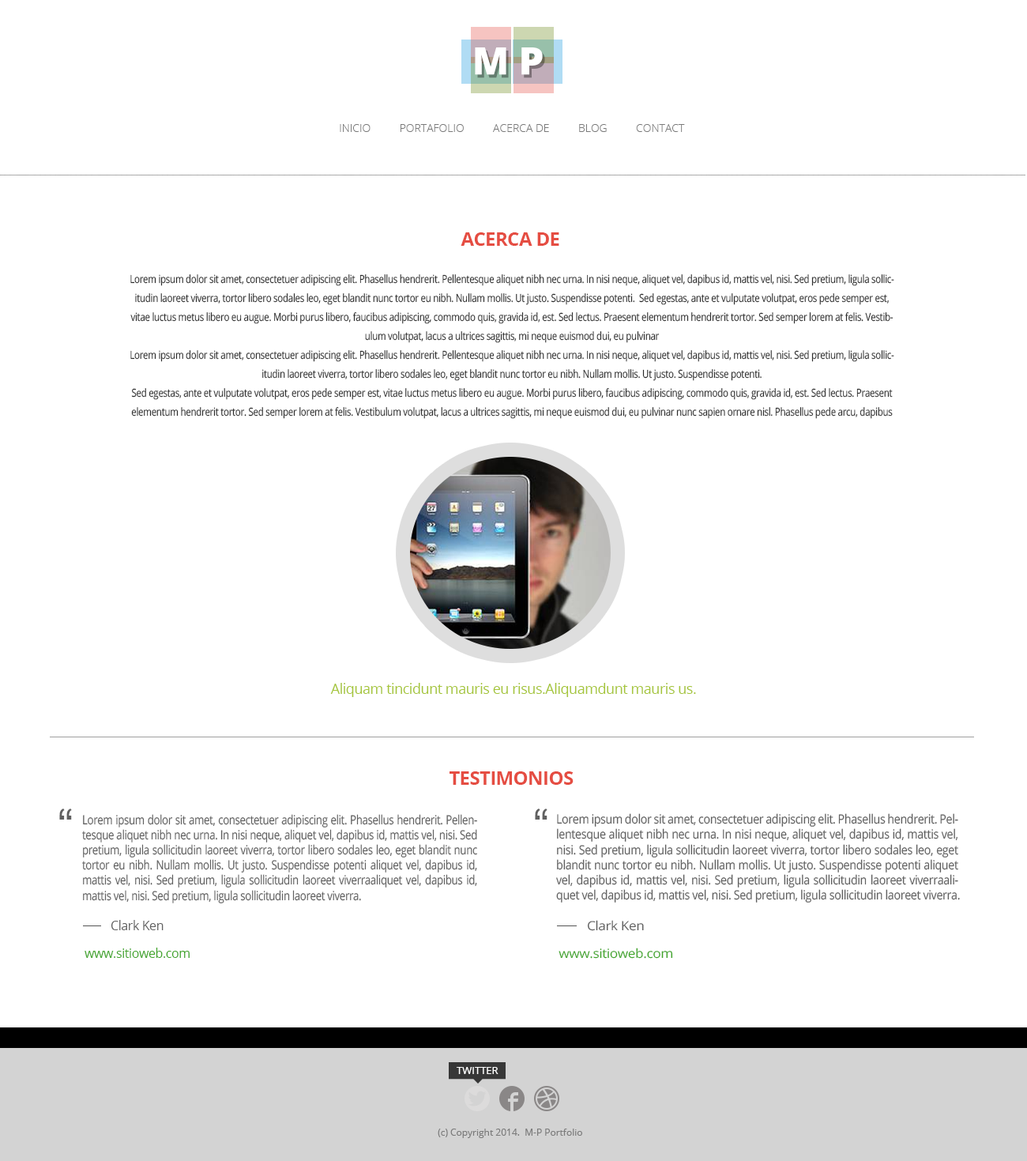
<style>
.page{position:relative;width:1027px;height:1161px;background:#ffffff}
.page>*{position:absolute;margin:0}
.t1{font:37.9px "OpenSans-Extrabold";letter-spacing:0.25em;color:#ffffff}
.t2{font:37.9px "OpenSans-Extrabold";letter-spacing:0.25em;color:#ffffff;scale:1.06 1}
.t3{font:11.1px "OpenSans-Light";color:#7a7a7a;text-transform:uppercase}
.t4{font:19px "OpenSans-Bold";letter-spacing:-0.025em;color:#e54d42;text-transform:uppercase}
.t5{font:11.1px/19px "OpenSans";letter-spacing:-0.025em;color:#2b2b2b;scale:0.83 1}
.t6{font:14.2px "OpenSans";letter-spacing:-0.025em;color:#a6c63a}
.t7{font:47.4px "ArialMT";letter-spacing:-0.025em;color:#616161}
.t8{font:12.6px "OpenSans";letter-spacing:-0.025em;color:#616161;scale:0.83 1}
.t9{font:12.7px "OpenSans";letter-spacing:-0.025em;color:#616161;scale:0.89 1}
.t10{font:12.6px "OpenSans";letter-spacing:-0.025em;color:#616161}
.t11{font:12.7px "OpenSans";letter-spacing:-0.025em;color:#616161;scale:1.08 1}
.t12{font:12.6px "OpenSans";letter-spacing:-0.025em;color:#41a62a}
.t13{font:12.7px "OpenSans";letter-spacing:-0.025em;color:#41a62a;scale:1.08 1}
.t14{font:10.3px "OpenSans";color:#ffffff;text-transform:uppercase}
.t15{font:9.5px "OpenSans";color:#7a7a7a}
</style>
<div class="page">
<p class="t1" style="left:475px;top:47px;width:68px;height:28px">M<span class="t2">P</span></p>
<p class="t3" style="left:340px;top:124px;width:345px;height:8px">INICIO          PortAfolio          ACERCA DE          BLOG          Contact</p>
<p class="t4" style="left:461px;top:232px;width:98px;height:14px">Acerca de</p>
<p class="t5" style="left:130px;top:274px;width:765px;height:145px;text-align:center">Lorem ipsum dolor sit amet, consectetuer adipiscing elit. Phasellus hendrerit. Pellentesque aliquet nibh nec urna. In nisi neque, aliquet vel, dapibus id, mattis vel, nisi. Sed pretium, ligula sollicitudin laoreet viverra, tortor libero sodales leo, eget blandit nunc tortor eu nibh. Nullam mollis. Ut justo. Suspendisse potenti.  Sed egestas, ante et vulputate volutpat, eros pede semper est, vitae luctus metus libero eu augue. Morbi purus libero, faucibus adipiscing, commodo quis, gravida id, est. Sed lectus. Praesent elementum hendrerit tortor. Sed semper lorem at felis. Vestibulum volutpat, lacus a ultrices sagittis, mi neque euismod dui, eu pulvinar <br>Lorem ipsum dolor sit amet, consectetuer adipiscing elit. Phasellus hendrerit. Pellentesque aliquet nibh nec urna. In nisi neque, aliquet vel, dapibus id, mattis vel, nisi. Sed pretium, ligula sollicitudin laoreet viverra, tortor libero sodales leo, eget blandit nunc tortor eu nibh. Nullam mollis. Ut justo. Suspendisse potenti.<br>Sed egestas, ante et vulputate volutpat, eros pede semper est, vitae luctus metus libero eu augue. Morbi purus libero, faucibus adipiscing, commodo quis, gravida id, est. Sed lectus. Praesent elementum hendrerit tortor. Sed semper lorem at felis. Vestibulum volutpat, lacus a ultrices sagittis, mi neque euismod dui, eu pulvinar nunc sapien ornare nisl. Phasellus pede arcu, dapibus</p>
<p class="t6" style="left:330px;top:683px;width:366px;height:14px">Aliquam tincidunt mauris eu risus.Aliquamdunt mauris us.</p>
<p class="t4" style="left:450px;top:771px;width:124px;height:14px">Testimonios</p>
<p class="t7" style="left:59px;top:808px;width:13px;height:11px">“</p>
<p class="t7" style="left:535px;top:808px;width:13px;height:11px">“</p>
<p class="t8" style="left:82px;top:814px;width:395px;height:89px;text-align:justify">Lorem ipsum dolor sit amet, consectetuer adipiscing elit. Phasellus hendrerit. Pellentesque aliquet nibh nec urna. In nisi neque, aliquet vel, dapibus id, mattis vel, nisi. Sed pretium, ligula sollicitudin laoreet viverra, tortor libero sodales leo, eget blandit nunc tortor eu nibh. Nullam mollis. Ut justo. Suspendisse potenti aliquet vel, dapibus id, mattis vel, nisi. Sed pretium, ligula sollicitudin laoreet viverraaliquet vel, dapibus id, mattis vel, nisi. Sed pretium, ligula sollicitudin laoreet viverra.</p>
<p class="t9" style="left:556px;top:813px;width:404px;height:89px;text-align:justify">Lorem ipsum dolor sit amet, consectetuer adipiscing elit. Phasellus hendrerit. Pellentesque aliquet nibh nec urna. In nisi neque, aliquet vel, dapibus id, mattis vel, nisi. Sed pretium, ligula sollicitudin laoreet viverra, tortor libero sodales leo, eget blandit nunc tortor eu nibh. Nullam mollis. Ut justo. Suspendisse potenti aliquet vel, dapibus id, mattis vel, nisi. Sed pretium, ligula sollicitudin laoreet viverraaliquet vel, dapibus id, mattis vel, nisi. Sed pretium, ligula sollicitudin laoreet viverra.</p>
<p class="t10" style="left:111px;top:920px;width:53px;height:10px">Clark Ken</p>
<p class="t11" style="left:587px;top:920px;width:57px;height:11px">Clark Ken</p>
<p class="t12" style="left:85px;top:947px;width:105px;height:11px">www.sitioweb.com</p>
<p class="t13" style="left:559px;top:947px;width:114px;height:12px">www.sitioweb.com</p>
<p class="t14" style="left:457px;top:1067px;width:42px;height:7px">twitter</p>
<p class="t15" style="left:438px;top:1128px;width:144px;height:10px">(c) Copyright 2014.  M-P Portfolio</p>
</div>
